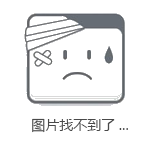
<style>
.page{position:relative;width:150px;height:150px;background:#ffffff}
.page>*{position:absolute;margin:0}
.t1{font:14px "MicrosoftYaHei";color:#494949}
</style>
<div class="page">
<p class="t1" style="left:32px;top:118px;width:96px;height:15px">图片找不到了...</p>
</div>
